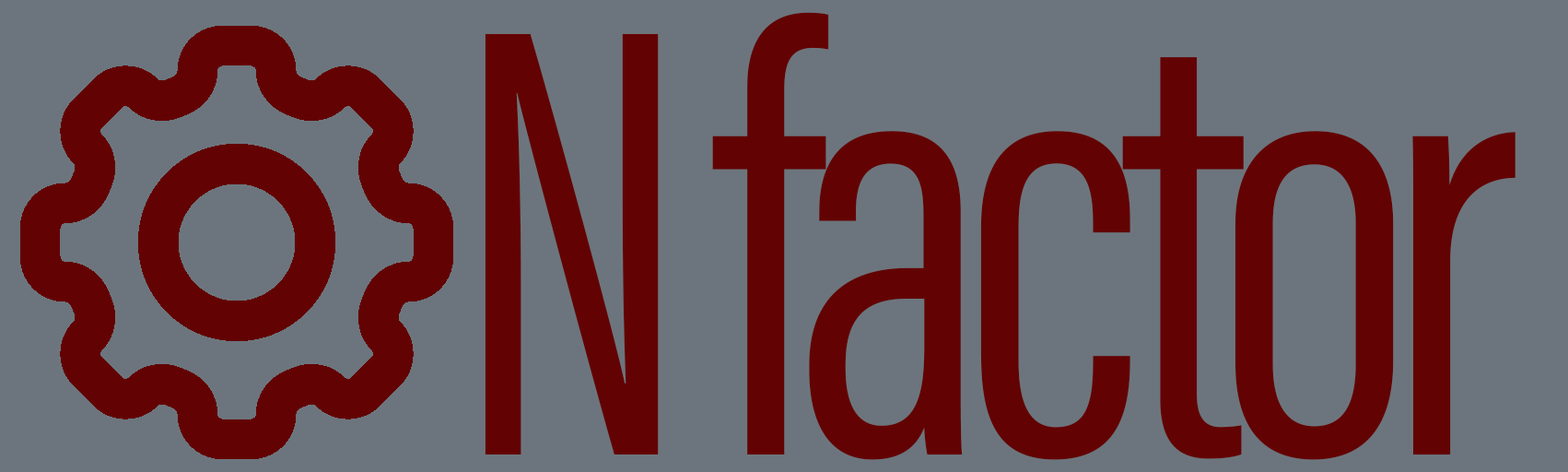
<style>
.page{position:relative;width:1568px;height:472px;background:#6c757d}
.page>*{position:absolute;margin:0}
.t1{font:628.9px "AcuminConcept_367wght_50wdth";letter-spacing:-0.05em;color:#630202}
</style>
<div class="page">
<p class="t1" style="left:485px;top:12px;width:1030px;height:448px">N factor</p>
</div>
